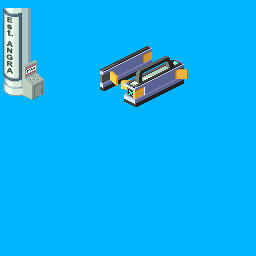
<style>
.page{position:relative;width:256px;height:256px;background:#00b5ff}
.page>*{position:absolute;margin:0}
.t1{font:6.9px/6.7px "Arial-BoldMT";color:#39524a;scale:1.28 1}
.t2{font:8.3px/6.7px "Arial-BoldMT";color:#39524a;scale:1.28 1}
</style>
<div class="page">
<p class="t1" style="left:6px;top:16px;width:7px;height:58px;text-align:center;rotate:11deg">E<br><span class="t2">s<br> t.<br></span>A<br>N<br>G<br>R<br>A</p>
</div>
